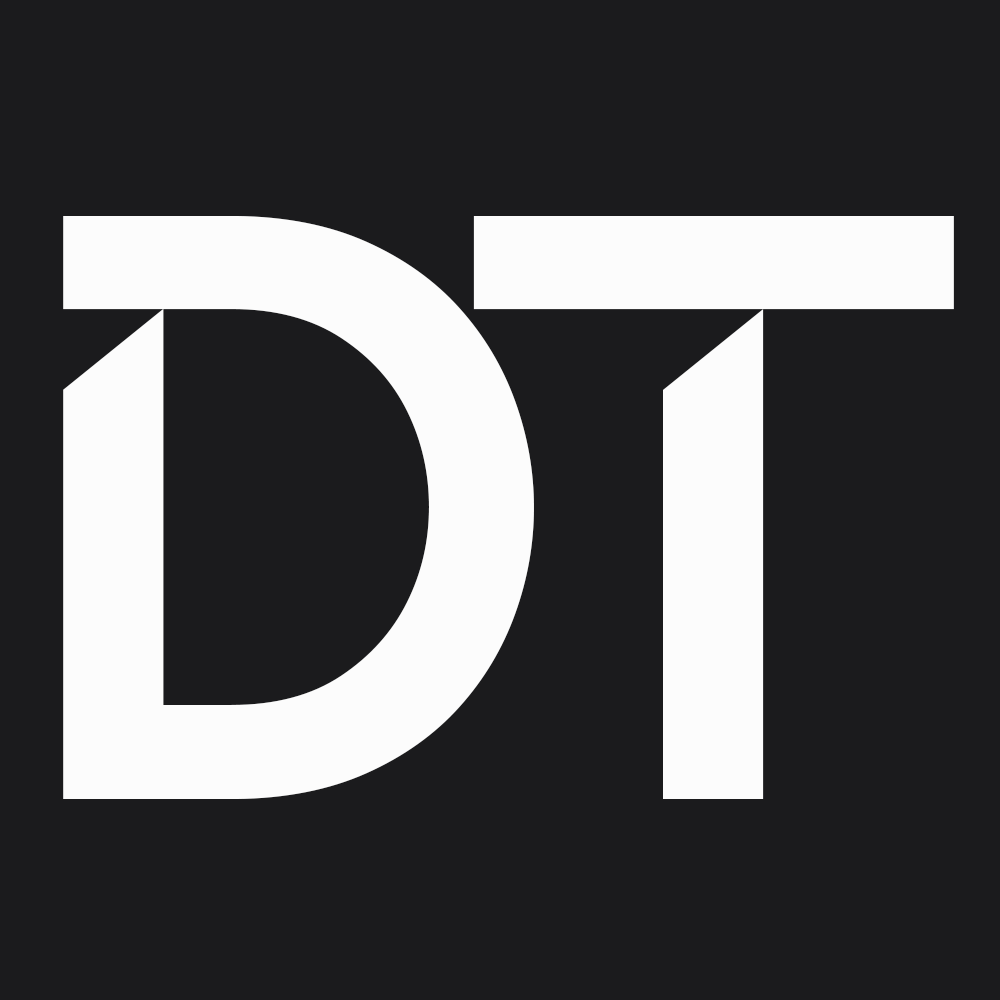
<style>
.page{position:relative;width:1000px;height:1000px;background:#1b1b1d}
.page>*{position:absolute;margin:0}
.t1{font:833.3px "Blackpast-DEMO";color:#fcfcfc}
</style>
<div class="page">
<p class="t1" style="left:63px;top:216px;width:471px;height:583px">d</p>
<p class="t1" style="left:473px;top:216px;width:481px;height:583px">t</p>
</div>
